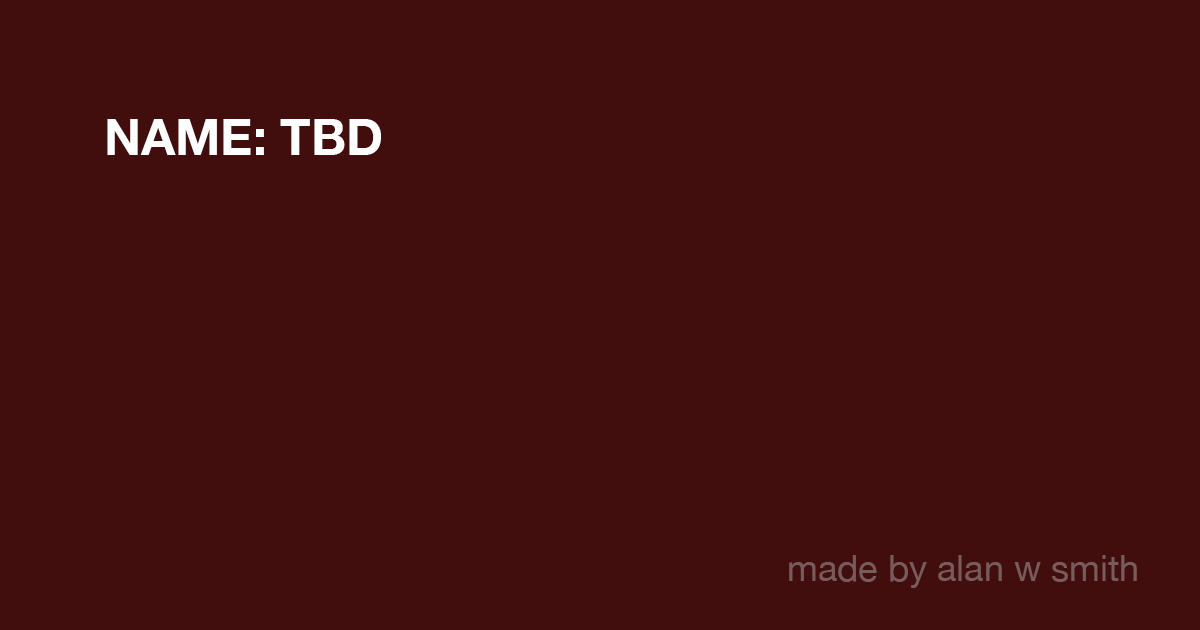
<style>
.page{position:relative;width:1200px;height:630px;background:#420d0d}
.page>*{position:absolute;margin:0}
.t1{font:50px "HelveticaNeue-Bold";color:#ffffff}
.t2{font:36px "HelveticaNeue";color:#785c5c}
</style>
<div class="page">
<p class="t1" style="left:107px;top:119px;width:275px;height:36px">NAME: TBD</p>
<p class="t2" style="left:789px;top:555px;width:348px;height:33px">made by alan w smith</p>
</div>
